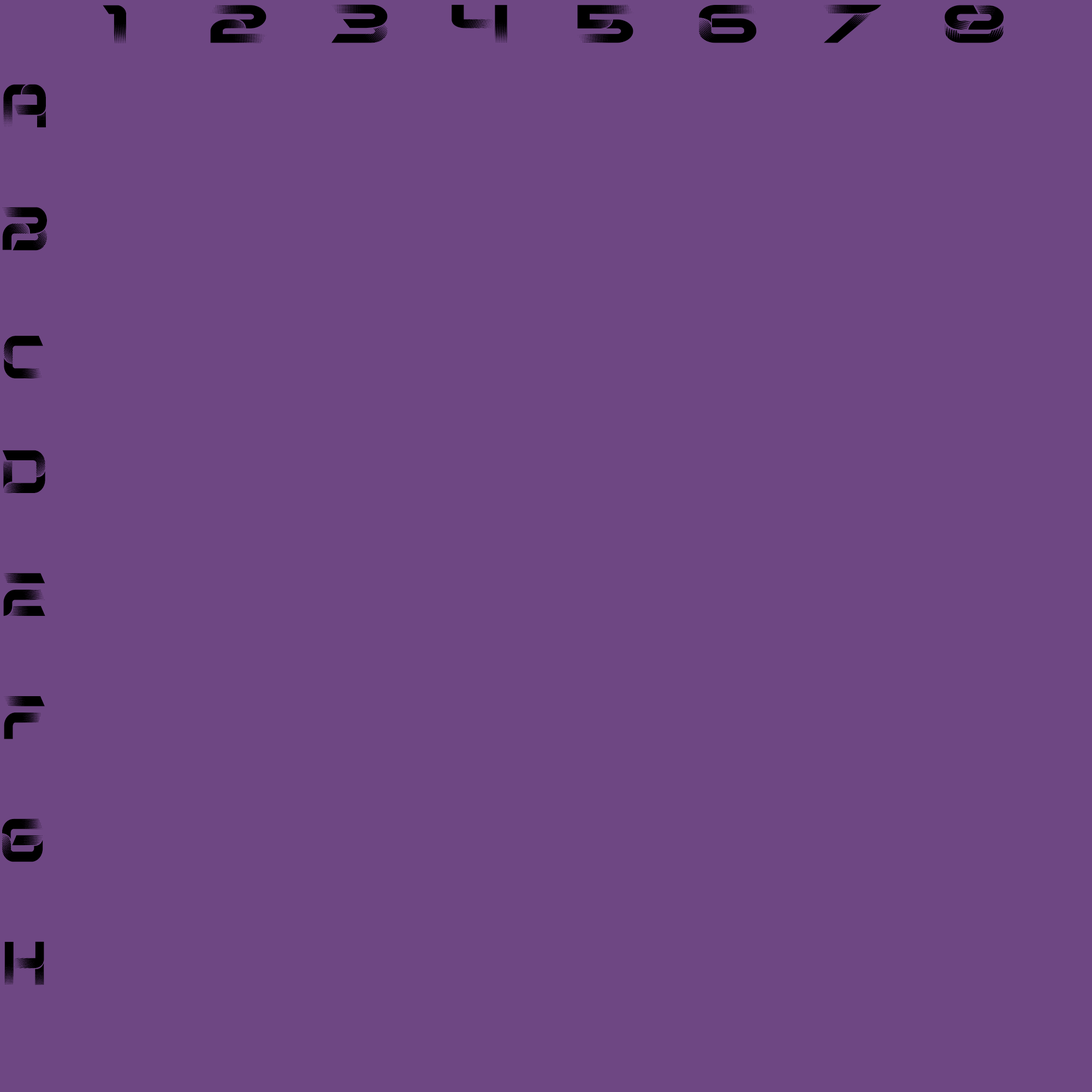
<style>
.page{position:relative;width:1092px;height:1092px;background:#6e4783}
.page>*{position:absolute;margin:0}
.t1{font:55.8px "Tourner-Regular";letter-spacing:0.04em;color:#000000;scale:1.37 1}
.t2{font:62.8px "Tourner-Regular";color:#000000;scale:0.86 1}
</style>
<div class="page">
<p class="t1" style="left:103px;top:5px;width:24px;height:38px">1</p>
<p class="t1" style="left:210px;top:5px;width:56px;height:38px">2</p>
<p class="t1" style="left:331px;top:4px;width:57px;height:39px">3</p>
<p class="t1" style="left:452px;top:4px;width:55px;height:39px">4</p>
<p class="t1" style="left:577px;top:5px;width:56px;height:38px">5</p>
<p class="t1" style="left:699px;top:5px;width:58px;height:38px">6</p>
<p class="t1" style="left:823px;top:4px;width:59px;height:39px">7</p>
<p class="t1" style="left:945px;top:5px;width:59px;height:38px">8</p>
<p class="t2" style="left:3px;top:84px;width:43px;height:44px">A</p>
<p class="t2" style="left:2px;top:207px;width:45px;height:44px">B</p>
<p class="t2" style="left:4px;top:336px;width:39px;height:42px">C</p>
<p class="t2" style="left:2px;top:450px;width:43px;height:43px">D</p>
<p class="t2" style="left:3px;top:573px;width:42px;height:43px">E</p>
<p class="t2" style="left:4px;top:696px;width:41px;height:43px">F</p>
<p class="t2" style="left:2px;top:818px;width:41px;height:44px">G</p>
<p class="t2" style="left:4px;top:941px;width:40px;height:44px">H</p>
</div>
